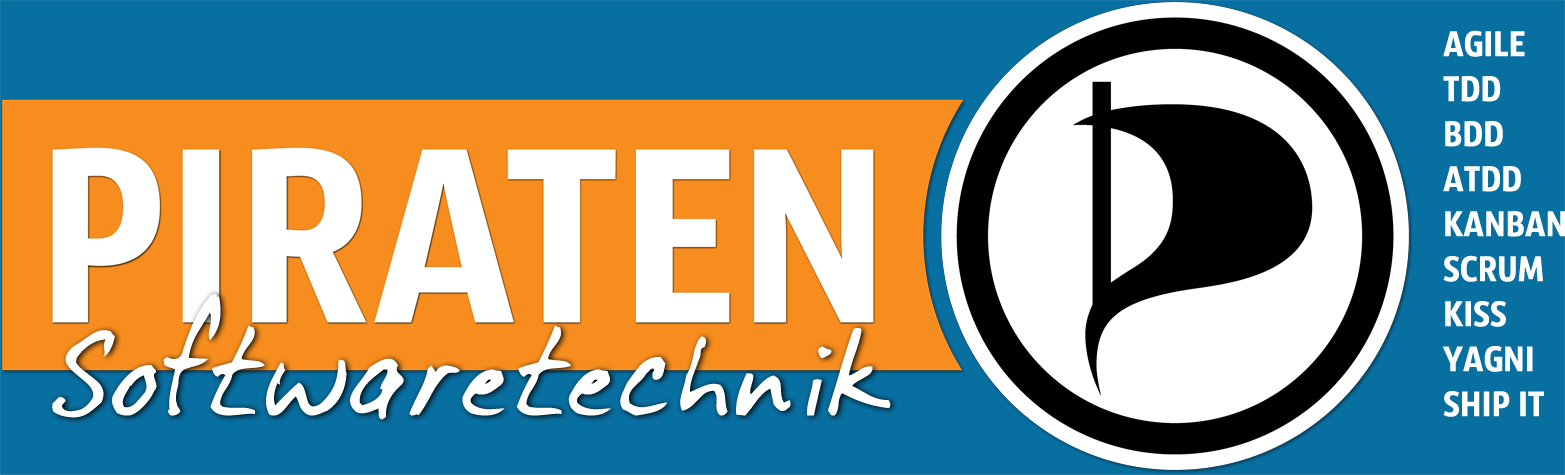
<style>
.page{position:relative;width:1565px;height:475px;background:#086fa1}
.page>*{position:absolute;margin:0}
.t1{font:37.5px "SansusWebissimo";color:#ffffff}
.t2{font:104.2px "DirtyDarren";color:#ffffff}
</style>
<div class="page">
<p class="t1" style="left:1442px;top:30px;width:123px;height:387px">AGILE<br>TDD<br>BDD<br>ATDD<br>KANBAN<br>SCRUM<br>KISS<br>YAGNI<br>SHIP IT</p>
<p class="t2" style="left:52px;top:293px;width:839px;height:127px">Softwaretechnik</p>
</div>
